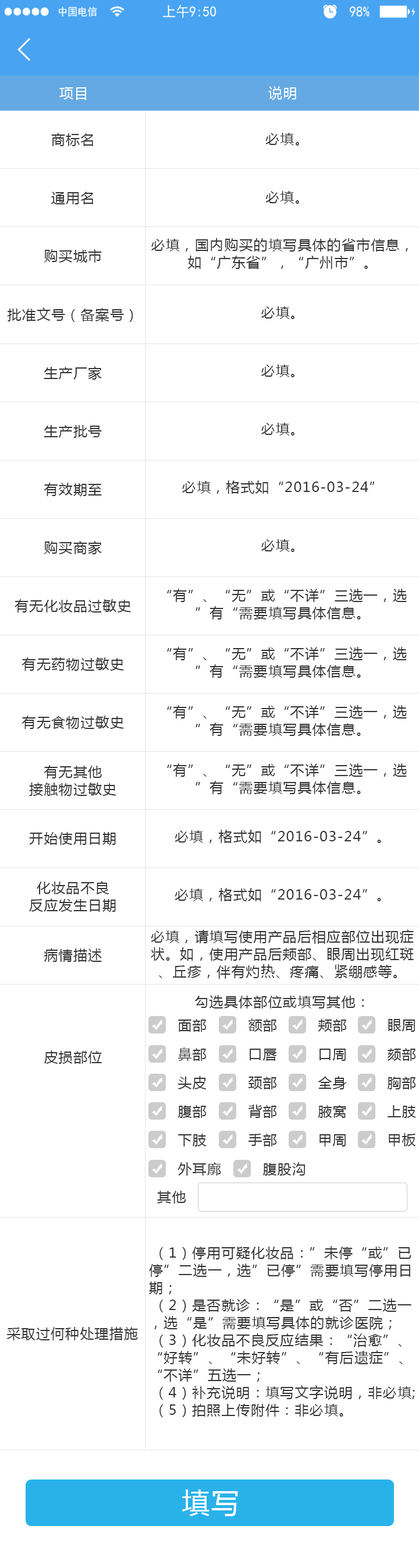
<style>
.page{position:relative;width:419px;height:1568px;background:#ffffff}
.page>*{position:absolute;margin:0}
.t1{font:14px "MicrosoftYaHei";letter-spacing:0.05em;color:#ffffff}
.t2{font:14px "MicrosoftYaHei";letter-spacing:0.05em;color:#333333}
.t3{font:14px/17.5px "MicrosoftYaHei";letter-spacing:0.05em;color:#333333}
.t4{font:27.9px "MicrosoftYaHei";letter-spacing:0.05em;color:#ffffff}
</style>
<div class="page">
<p class="t1" style="left:59px;top:87px;width:27px;height:13px">项目</p>
<p class="t1" style="left:268px;top:86px;width:28px;height:14px">说明</p>
<p class="t2" style="left:51px;top:133px;width:42px;height:13px">商标名</p>
<p class="t2" style="left:266px;top:133px;width:33px;height:13px">必填。</p>
<p class="t2" style="left:51px;top:192px;width:42px;height:12px">通用名</p>
<p class="t2" style="left:266px;top:191px;width:33px;height:13px">必填。</p>
<p class="t3" style="left:151px;top:238px;width:257px;height:31px;text-align:center">必填，国内购买的填写具体的省市信息，如“广东省”，“广州市”。</p>
<p class="t2" style="left:44px;top:249px;width:58px;height:14px">购买城市</p>
<p class="t2" style="left:7px;top:307px;width:126px;height:15px">批准文号（备案号）</p>
<p class="t2" style="left:261px;top:306px;width:34px;height:13px">必填。</p>
<p class="t2" style="left:261px;top:364px;width:34px;height:13px">必填。</p>
<p class="t2" style="left:44px;top:366px;width:58px;height:14px">生产厂家</p>
<p class="t2" style="left:44px;top:425px;width:58px;height:13px">生产批号</p>
<p class="t2" style="left:261px;top:423px;width:34px;height:13px">必填。</p>
<p class="t2" style="left:44px;top:483px;width:58px;height:14px">有效期至</p>
<p class="t2" style="left:182px;top:480px;width:193px;height:14px">必填，格式如“2016-03-24”</p>
<p class="t2" style="left:44px;top:541px;width:58px;height:13px">购买商家</p>
<p class="t2" style="left:261px;top:539px;width:34px;height:13px">必填。</p>
<p class="t3" style="left:167px;top:589px;width:240px;height:31px;text-align:center">“有”、“无”或“不详”三选一，选”有“需要填写具体信息。</p>
<p class="t2" style="left:15px;top:599px;width:116px;height:14px">有无化妆品过敏史</p>
<p class="t3" style="left:167px;top:647px;width:240px;height:31px;text-align:center">“有”、“无”或“不详”三选一，选”有“需要填写具体信息。</p>
<p class="t2" style="left:22px;top:657px;width:102px;height:14px">有无药物过敏史</p>
<p class="t3" style="left:167px;top:705px;width:240px;height:31px;text-align:center">“有”、“无”或“不详”三选一，选”有“需要填写具体信息。</p>
<p class="t2" style="left:22px;top:716px;width:102px;height:13px">有无食物过敏史</p>
<p class="t3" style="left:29px;top:765px;width:87px;height:31px;text-align:center">有无其他<br>接触物过敏史</p>
<p class="t3" style="left:167px;top:763px;width:240px;height:31px;text-align:center">“有”、“无”或“不详”三选一，选”有“需要填写具体信息。</p>
<p class="t2" style="left:29px;top:832px;width:87px;height:13px">开始使用日期</p>
<p class="t2" style="left:175px;top:830px;width:206px;height:13px">必填，格式如“2016-03-24”。</p>
<p class="t3" style="left:29px;top:881px;width:87px;height:31px;text-align:center">化妆品不良<br>反应发生日期</p>
<p class="t2" style="left:175px;top:888px;width:206px;height:13px">必填，格式如“2016-03-24”。</p>
<p class="t3" style="left:151px;top:929px;width:263px;height:50px;text-align:center">必填，请填写使用产品后相应部位出现症状。如，使用产品后颊部、眼周出现红斑、丘疹，伴有灼热、疼痛、紧绷感等。</p>
<p class="t2" style="left:44px;top:948px;width:58px;height:14px">病情描述</p>
<p class="t2" style="left:195px;top:995px;width:169px;height:13px">勾选具体部位或填写其他：</p>
<p class="t2" style="left:178px;top:1019px;width:28px;height:13px">面部</p>
<p class="t2" style="left:248px;top:1018px;width:29px;height:14px">额部</p>
<p class="t2" style="left:318px;top:1019px;width:28px;height:13px">颊部</p>
<p class="t2" style="left:388px;top:1019px;width:27px;height:13px">眼周</p>
<p class="t2" style="left:178px;top:1047px;width:28px;height:14px">鼻部</p>
<p class="t2" style="left:250px;top:1049px;width:27px;height:12px">口唇</p>
<p class="t2" style="left:320px;top:1049px;width:26px;height:12px">口周</p>
<p class="t2" style="left:387px;top:1048px;width:29px;height:13px">颏部</p>
<p class="t2" style="left:44px;top:1050px;width:58px;height:14px">皮损部位</p>
<p class="t2" style="left:178px;top:1076px;width:29px;height:13px">头皮</p>
<p class="t2" style="left:248px;top:1077px;width:29px;height:12px">颈部</p>
<p class="t2" style="left:318px;top:1076px;width:29px;height:13px">全身</p>
<p class="t2" style="left:387px;top:1077px;width:29px;height:12px">胸部</p>
<p class="t2" style="left:178px;top:1105px;width:28px;height:13px">腹部</p>
<p class="t2" style="left:249px;top:1105px;width:28px;height:13px">背部</p>
<p class="t2" style="left:318px;top:1105px;width:28px;height:13px">腋窝</p>
<p class="t2" style="left:388px;top:1105px;width:28px;height:13px">上肢</p>
<p class="t2" style="left:178px;top:1134px;width:29px;height:12px">下肢</p>
<p class="t2" style="left:249px;top:1134px;width:28px;height:12px">手部</p>
<p class="t2" style="left:389px;top:1133px;width:27px;height:13px">甲板</p>
<p class="t2" style="left:320px;top:1134px;width:26px;height:12px">甲周</p>
<p class="t2" style="left:178px;top:1162px;width:43px;height:14px">外耳廓</p>
<p class="t2" style="left:263px;top:1162px;width:43px;height:14px">腹股沟</p>
<p class="t2" style="left:157px;top:1191px;width:29px;height:13px">其他</p>
<p class="t3" style="left:149px;top:1246px;width:266px;height:171px">（1）停用可疑化妆品：”未停“或”已停”二选一，选”已停”需要填写停用日期；<br> （2）是否就诊：“是”或“否”二选一，选“是”需要填写具体的就诊医院；<br> （3）化妆品不良反应结果：“治愈”、“好转”、“未好转”、“有后遗症”、“不详”五选一；<br> （4）补充说明：填写文字说明，非必填;<br> （5）拍照上传附件：非必填。</p>
<p class="t2" style="left:6px;top:1327px;width:132px;height:13px">采取过何种处理措施</p>
<p class="t4" style="left:182px;top:1489px;width:56px;height:27px">填写</p>
</div>
